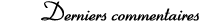
<style>
.page{position:relative;width:200px;height:23px;background:#ffffff}
.page>*{position:absolute;margin:0}
.t1{font:25.2px "Coronet";letter-spacing:-0.025em;color:#000000;scale:1.11 1}
</style>
<div class="page">
<p class="t1" style="left:41px;top:1px;width:158px;height:20px">Derniers commentaires</p>
</div>
